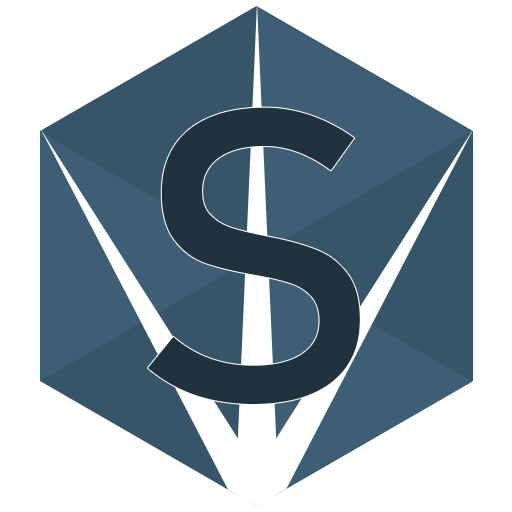
<style>
.page{position:relative;width:512px;height:512px;background:#ffffff}
.page>*{position:absolute;margin:0}
.t1{font:409.1px "Bahnschrift";color:#20323e}
</style>
<div class="page">
<p class="t1" style="left:147px;top:107px;width:213px;height:297px">S</p>
</div>
